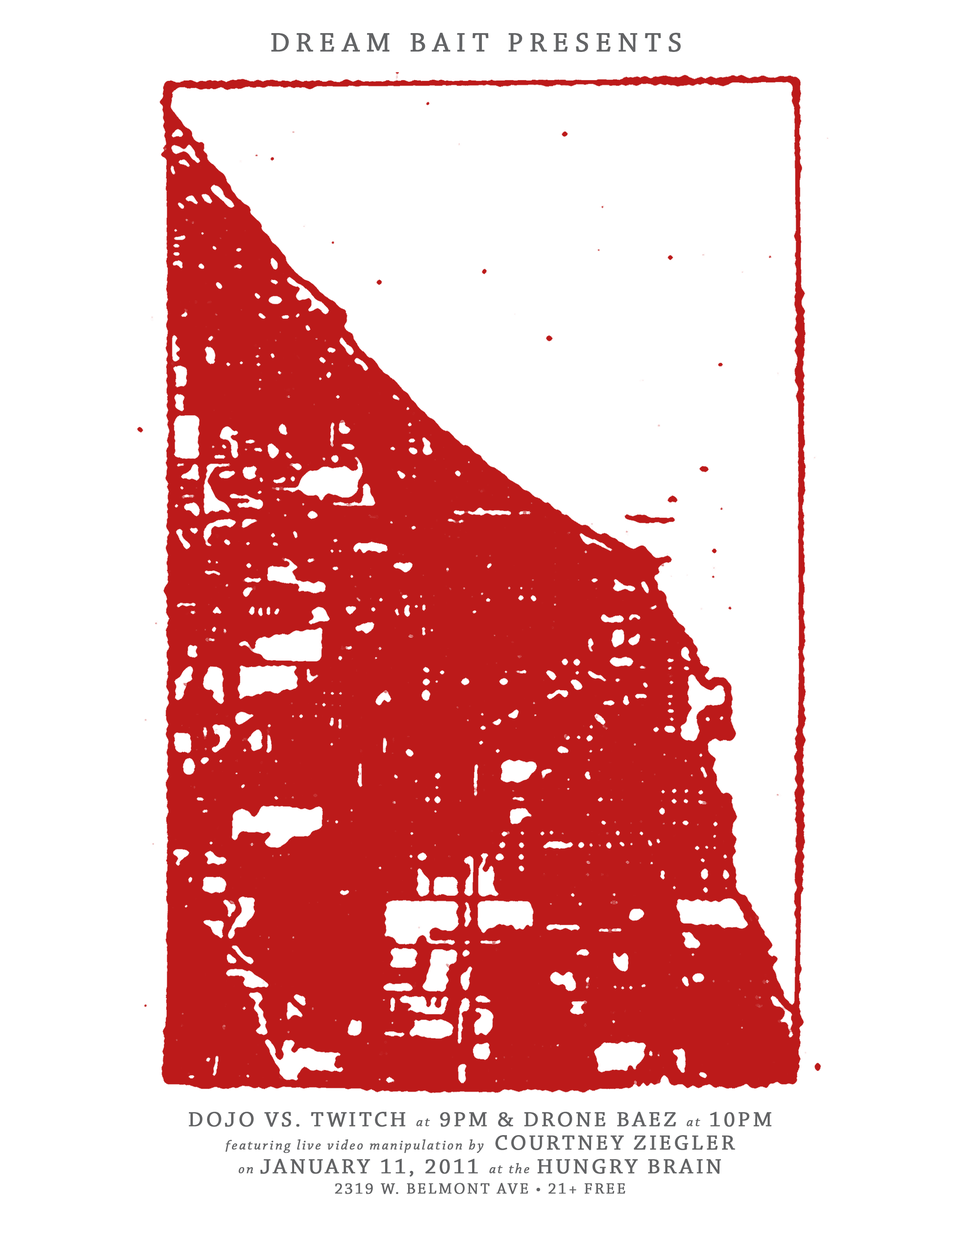
<style>
.page{position:relative;width:960px;height:1242px;background:#ffffff}
.page>*{position:absolute;margin:0}
.t1{font:28.2px "ChaparralPro-Regular";letter-spacing:0.2em;color:#636466;text-transform:uppercase;font-weight:bold}
.t2{font:14.1px/17.3px "ChaparralPro-Italic";letter-spacing:0.1em;color:#636466;font-weight:bold}
.t3{font:22px/23.5px "ChaparralPro-Regular";letter-spacing:0.1em;color:#636466;text-transform:uppercase;font-weight:bold}
.t4{font:14.1px/23.5px "ChaparralPro-Italic";letter-spacing:0.1em;color:#636466;font-weight:bold}
.t5{font:22px/23.5px "ChaparralPro-Regular";letter-spacing:0.1em;color:#636466;font-weight:bold}
.t6{font:15.7px/20.4px "ChaparralPro-Regular";letter-spacing:0.1em;color:#636466;text-transform:uppercase;font-weight:bold}
</style>
<div class="page">
<p class="t1" style="left:271px;top:33px;width:410px;height:19px">DREAM BAIT PRESENTS</p>
<p class="t2" style="left:189px;top:1112px;width:582px;height:82px;text-align:center"><span class="t3">Dojo vs. Twitch </span>at<span class="t3"> 9pm &amp; Drone Baez </span>at<span class="t3"> 10PM <br></span>featuring live video manipulation by  <span class="t3">Courtney Ziegler<br></span><span class="t4">on </span><span class="t5">J</span><span class="t3">anuary 11, 2011 </span><span class="t4">at the </span><span class="t3">Hungry Brain<br></span><span class="t6">2319 w. Belmont Ave • 21+ Free</span></p>
</div>
